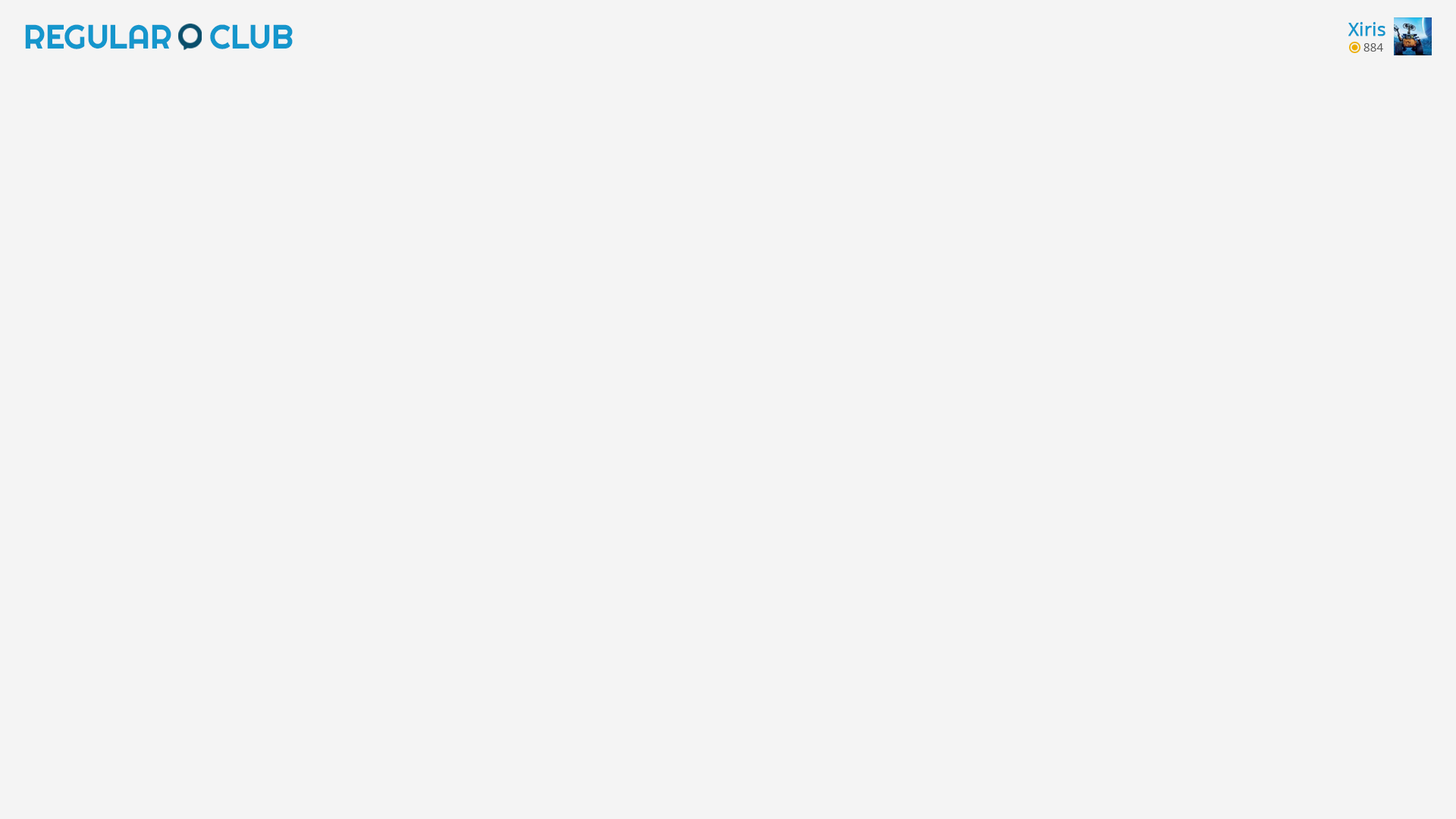
<style>
.page{position:relative;width:1456px;height:819px;background:#f4f4f4}
.page>*{position:absolute;margin:0}
.t1{font:33.8px "Righteous-Regular";color:#1596cc}
.t2{font:18px "OpenSans";color:#1596cc;font-weight:bold}
.t3{font:11.7px "OpenSans";color:#585858}
</style>
<div class="page">
<p class="t1" style="left:25px;top:24px;width:146px;height:25px">REGULAR</p>
<p class="t1" style="left:210px;top:24px;width:83px;height:25px">CLUB</p>
<p class="t2" style="left:1348px;top:22px;width:37px;height:14px">Xiris</p>
<p class="t3" style="left:1363px;top:43px;width:20px;height:9px">884</p>
</div>
